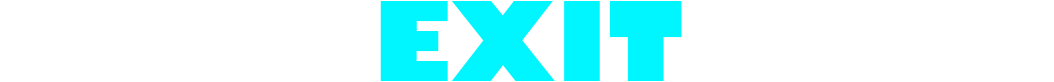
<style>
.page{position:relative;width:1054px;height:82px;background:#ffffff}
.page>*{position:absolute;margin:0}
.t1{font:108.3px "GillSans-UltraBold";color:#00f6ff}
</style>
<div class="page">
<p class="t1" style="left:380px;top:1px;width:302px;height:80px">EXIT</p>
</div>
